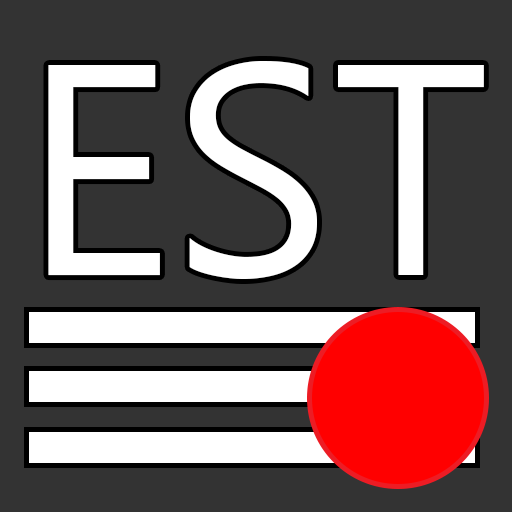
<style>
.page{position:relative;width:512px;height:512px;background:#333333}
.page>*{position:absolute;margin:0}
.t1{font:300px "SegoeUI";color:#ffffff}
</style>
<div class="page">
<p class="t1" style="left:48px;top:61px;width:436px;height:218px">EST</p>
</div>
